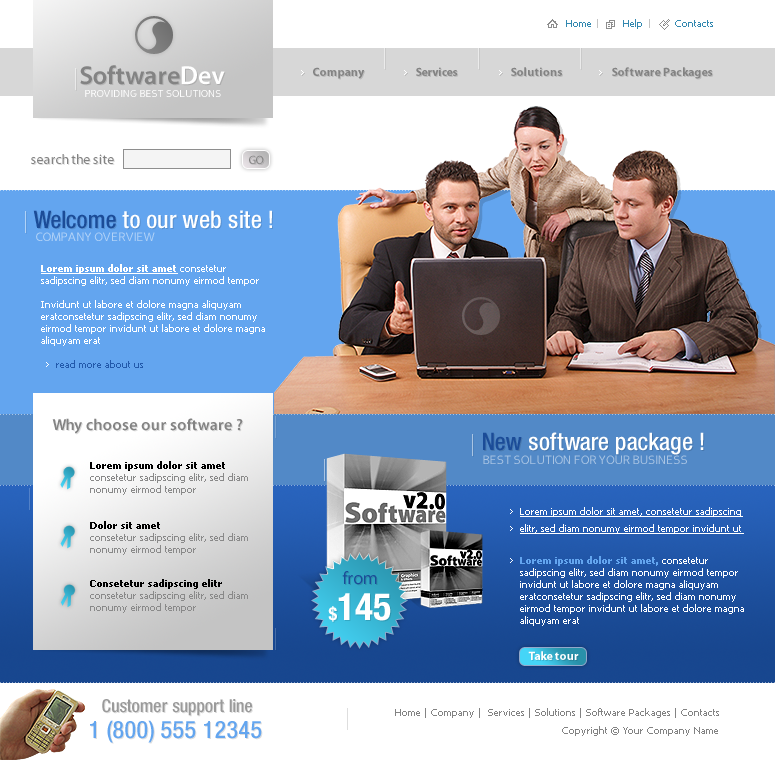
<style>
.page{position:relative;width:775px;height:760px;background:#ffffff}
.page>*{position:absolute;margin:0}
.t1{font:10px "Tahoma";color:#3288b0}
.t2{font:26px "MyriadPro-Semibold";color:#838383}
.t3{font:26px "MyriadPro-Semibold";color:#ffffff}
.t4{font:12px "MyriadPro-Bold";color:#838383}
.t5{font:10px "PerspectiveSans";color:#ffffff;text-transform:uppercase}
.t6{font:14px "MyriadPro-Regular";color:#838383}
.t7{font:12px "MyriadPro-Regular";color:#838383}
.t8{font:24px "HelveticaNeueLTStd-MdCn";color:#ffffff}
.t9{font:24px "HelveticaNeueLTStd-MdCn";color:#1b4c98}
.t10{font:12px "PerspectiveSans";color:#b1d2f7;text-transform:uppercase}
.t11{font:10px "Tahoma";color:#ffffff}
.t12{font:10px "Tahoma-Bold";color:#ffffff;text-decoration:underline}
.t13{font:10px "Tahoma";color:#2259ab}
.t14{font:16px "MyriadPro-Semibold";color:#838383}
.t15{font:10px "Tahoma";color:#898989}
.t16{font:10px "Tahoma-Bold";color:#000000}
.t17{font:12px "PerspectiveSans";color:#a9c4e3;text-transform:uppercase}
.t18{font:10px/17px "Tahoma";color:#ffffff;text-decoration:underline}
.t19{font:10px "Tahoma-Bold";color:#63a5ef}
.t20{font:18px "MyriadPro-Regular";color:#1b4c98}
.t21{font:38px "HelveticaNeueLTStd-BdCn";color:#ffffff}
.t22{font:18px "HelveticaNeueLTStd-BdCn";color:#ffffff}
.t23{font:12px "MyriadPro-Bold";color:#ffffff}
.t24{font:18px "HelveticaNeueLTStd-MdCn";color:#9a9a9a}
.t25{font:10px/18.3px "Tahoma";color:#838383}
.t26{font:24px "HelveticaNeueLTStd-MdCn";color:#63a5ef}
</style>
<div class="page">
<p class="t1" style="left:566px;top:20px;width:25px;height:7px">Home</p>
<p class="t1" style="left:623px;top:19px;width:19px;height:10px">Help</p>
<p class="t1" style="left:675px;top:20px;width:38px;height:7px">Contacts</p>
<p class="t2" style="left:80px;top:65px;width:145px;height:20px">Software<span class="t3">Dev</span></p>
<p class="t4" style="left:313px;top:67px;width:52px;height:12px">Company</p>
<p class="t4" style="left:416px;top:67px;width:42px;height:9px">Services</p>
<p class="t4" style="left:511px;top:67px;width:51px;height:9px">Solutions</p>
<p class="t4" style="left:612px;top:67px;width:101px;height:12px">Software Packages</p>
<p class="t5" style="left:85px;top:90px;width:136px;height:7px">PROVIDING BEST SOLUTIONS</p>
<p class="t6" style="left:31px;top:154px;width:83px;height:10px">search the site</p>
<p class="t7" style="left:249px;top:155px;width:15px;height:9px">GO</p>
<p class="t8" style="left:33px;top:210px;width:239px;height:19px"><span class="t9">Welcome </span>to our web site !</p>
<p class="t10" style="left:36px;top:232px;width:119px;height:9px">company overview</p>
<p class="t11" style="left:41px;top:264px;width:224px;height:104px"><span class="t12">Lorem ipsum dolor sit amet </span>consetetur sadipscing elitr, sed diam nonumy eirmod tempor <br><br>Invidunt ut labore et dolore magna aliquyam eratconsetetur sadipscing elitr, sed diam nonumy eirmod tempor invidunt ut labore et dolore magna aliquyam erat<br><br>    <span class="t13"> read more about us</span></p>
<p class="t14" style="left:52px;top:418px;width:191px;height:16px">Why choose our software ?</p>
<p class="t8" style="left:483px;top:432px;width:221px;height:23px"><span class="t9">New </span>software package !</p>
<p class="t15" style="left:90px;top:461px;width:158px;height:34px"><span class="t16">Lorem ipsum dolor sit amet </span>consetetur sadipscing elitr, sed diam nonumy eirmod tempor</p>
<p class="t17" style="left:483px;top:455px;width:204px;height:9px">best solution for your business</p>
<p class="t18" style="left:520px;top:507px;width:224px;height:27px">Lorem ipsum dolor sit amet, consetetur sadipscing elitr, sed diam nonumy eirmod tempor invidunt ut</p>
<p class="t15" style="left:90px;top:521px;width:158px;height:34px"><span class="t16">Dolor sit amet<br></span>consetetur sadipscing elitr, sed diam nonumy eirmod tempor</p>
<p class="t11" style="left:520px;top:556px;width:224px;height:70px"><span class="t19">Lorem ipsum dolor sit amet, </span>consetetur sadipscing elitr, sed diam nonumy eirmod tempor invidunt ut labore et dolore magna aliquyam eratconsetetur sadipscing elitr, sed diam nonumy eirmod tempor invidunt ut labore et dolore magna aliquyam erat</p>
<p class="t15" style="left:90px;top:579px;width:158px;height:34px"><span class="t16">Consetetur sadipscing elitr<br></span>consetetur sadipscing elitr, sed diam nonumy eirmod tempor</p>
<p class="t20" style="left:342px;top:571px;width:35px;height:14px">from</p>
<p class="t21" style="left:328px;top:593px;width:63px;height:29px"><span class="t22">$</span>145</p>
<p class="t23" style="left:528px;top:651px;width:51px;height:9px">Take tour</p>
<p class="t24" style="left:102px;top:699px;width:150px;height:17px">Customer support line</p>
<p class="t25" style="left:395px;top:708px;width:324px;height:28px;text-align:right">Home | Company |  Services | Solutions | Software Packages | Contacts<br>Copyright © Your Company Name</p>
<p class="t26" style="left:90px;top:720px;width:172px;height:23px">1 (800) 555 12345</p>
</div>
